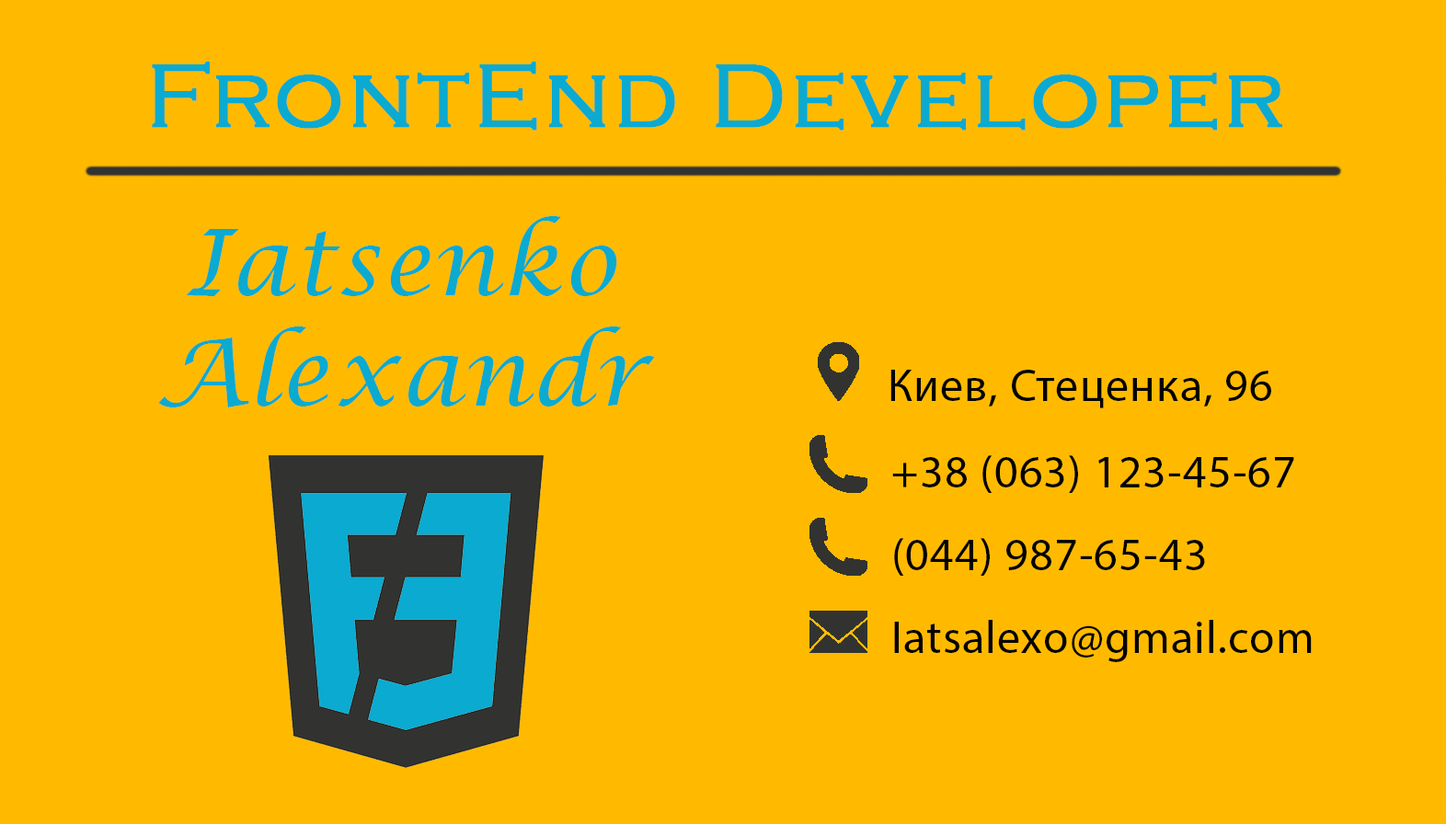
<style>
.page{position:relative;width:1446px;height:824px;background:#ffba00}
.page>*{position:absolute;margin:0}
.t1{font:92px "CopperplateGothic-Light";letter-spacing:0.027em;color:#0baad1;font-weight:bold}
.t2{font:92px/110.4px "LucidaCalligraphy-Italic";letter-spacing:0.025em;color:#0baad1}
.t3{font:46px "MyriadPro-Regular";letter-spacing:0.025em;color:#000000}
</style>
<div class="page">
<p class="t1" style="left:152px;top:62px;width:1131px;height:69px">FrontEnd Developer</p>
<p class="t2" style="left:158px;top:216px;width:497px;height:192px;text-align:center">Iatsenko<br>Alexandr</p>
<p class="t3" style="left:891px;top:370px;width:381px;height:39px">Киев, Стеценка, 96</p>
<p class="t3" style="left:893px;top:455px;width:402px;height:38px">+38 (063) 123-45-67</p>
<p class="t3" style="left:894px;top:538px;width:311px;height:38px">(044) 987-65-43</p>
<p class="t3" style="left:894px;top:620px;width:418px;height:42px">Iatsalexo@gmail.com</p>
</div>
